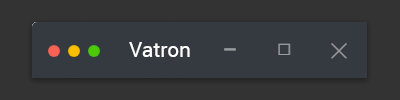
<style>
.page{position:relative;width:400px;height:100px;background:#333333}
.page>*{position:absolute;margin:0}
.t1{font:20.8px "Roboto-Regular";color:#ffffff}
</style>
<div class="page">
<p class="t1" style="left:129px;top:42px;width:61px;height:15px">Vatron</p>
</div>
